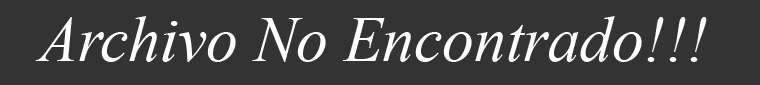
<style>
.page{position:relative;width:760px;height:85px;background:#333333}
.page>*{position:absolute;margin:0}
.t1{font:63.5px "TimesNewRomanPS-ItalicMT";color:#ffffff}
</style>
<div class="page">
<p class="t1" style="left:35px;top:16px;width:672px;height:46px">Archivo No Encontrado!!!</p>
</div>
